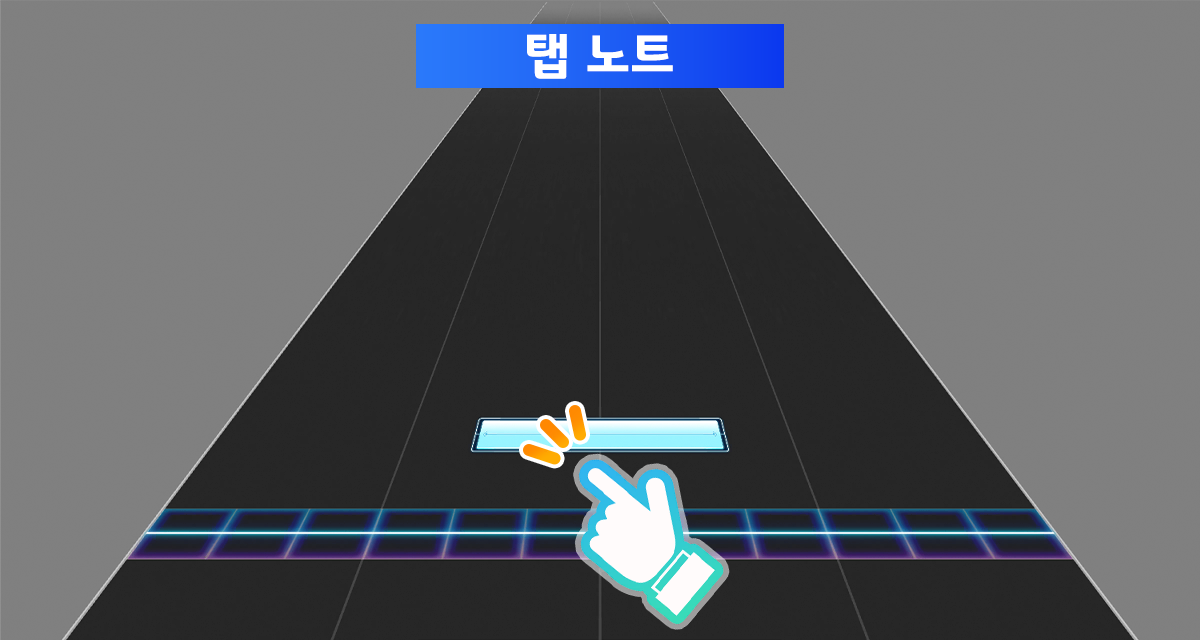
<style>
.page{position:relative;width:1200px;height:640px;background:#808080}
.page>*{position:absolute;margin:0}
.t1{font:50.7px "GyeonggiTitleB";letter-spacing:0.03em;color:#ffffff}
</style>
<div class="page">
<p class="t1" style="left:527px;top:34px;width:146px;height:45px">탭 노트</p>
</div>
